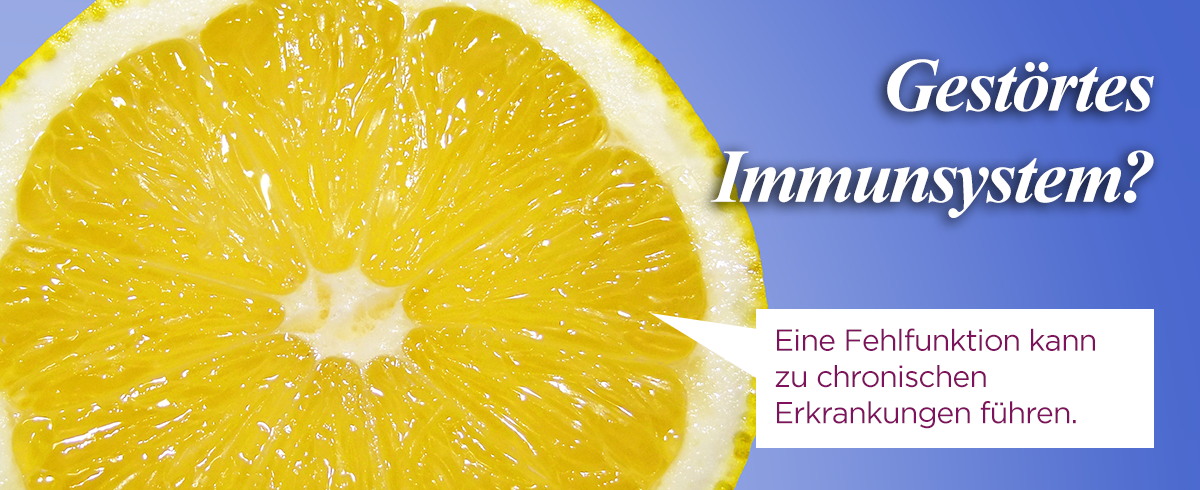
<style>
.page{position:relative;width:1200px;height:490px}
.page>*{position:absolute;margin:0}
.t1{font:76px "TimesNewRomanPS-BoldItalicMT";letter-spacing:-0.025em;color:#ffffff}
.t2{font:30.2px "Gotham-Book";letter-spacing:-0.025em;color:#7e125d}
</style>
<div class="page">
<p class="t1" style="left:710px;top:59px;width:444px;height:159px;text-align:right">Gestörtes<br>Immunsystem?</p>
<p class="t2" style="left:775px;top:328px;width:320px;height:101px">Eine Fehlfunktion kann<br>zu chronischen <br>Erkrankungen führen.</p>
</div>
